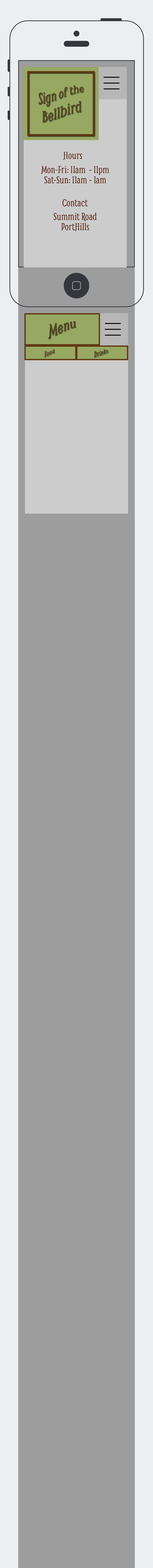
<style>
.page{position:relative;width:153px;height:1568px;background:#9d9d9d}
.page>*{position:absolute;margin:0}
.t1{font:14.2px "Smythe";color:#59481f}
.t2{font:16.7px "Smythe";color:#59481f}
.t3{font:10.9px "Smythe";color:#5b2713}
.t4{font:10.9px/5.1px "Smythe";color:#5b2713}
.t5{font:16.4px "Smythe";color:#59481f}
.t6{font:7.3px "Smythe";color:#59481f}
</style>
<div class="page">
<p class="t1" style="left:38px;top:85px;width:46px;height:21px">Sign of the</p>
<p class="t2" style="left:42px;top:101px;width:40px;height:21px">Bellbird</p>
<p class="t3" style="left:63px;top:152px;width:19px;height:8px">Hours</p>
<p class="t4" style="left:41px;top:166px;width:68px;height:17px;text-align:center">Mon-Fri: 11am  - 11pm<br><br>Sat-Sun: 11am - 1am</p>
<p class="t3" style="left:63px;top:199px;width:25px;height:7px">Contact</p>
<p class="t4" style="left:54px;top:213px;width:43px;height:18px;text-align:center">Summit Road<br><br>PortHills</p>
<p class="t5" style="left:48px;top:321px;width:28px;height:18px">Menu</p>
<p class="t6" style="left:44px;top:349px;width:11px;height:8px">Food</p>
<p class="t6" style="left:94px;top:349px;width:14px;height:8px">Drinks</p>
</div>
